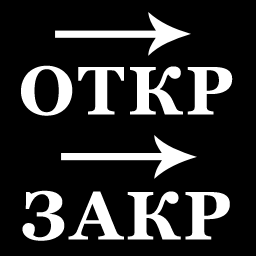
<style>
.page{position:relative;width:256px;height:256px;background:#000000}
.page>*{position:absolute;margin:0}
.t1{font:68px "Georgia-Bold";letter-spacing:0.05em;color:#ffffff}
</style>
<div class="page">
<p class="t1" style="left:21px;top:65px;width:212px;height:51px">ОТКР</p>
<p class="t1" style="left:22px;top:190px;width:208px;height:51px">ЗАКР</p>
</div>
